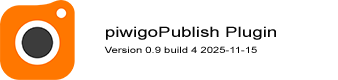
<style>
.page{position:relative;width:338px;height:80px;background:#ffffff}
.page>*{position:absolute;margin:0}
.t1{font:14.1px "ArialMT";color:#050505;scale:1.33 1}
.t2{font:8.5px "ArialMT";color:#050505;scale:1.33 1}
</style>
<div class="page">
<p class="t1" style="left:106px;top:26px;width:170px;height:14px">piwigoPublish Plugin</p>
<p class="t2" style="left:104px;top:46px;width:153px;height:7px">Version 0.9 build 4 2025-11-15</p>
</div>
